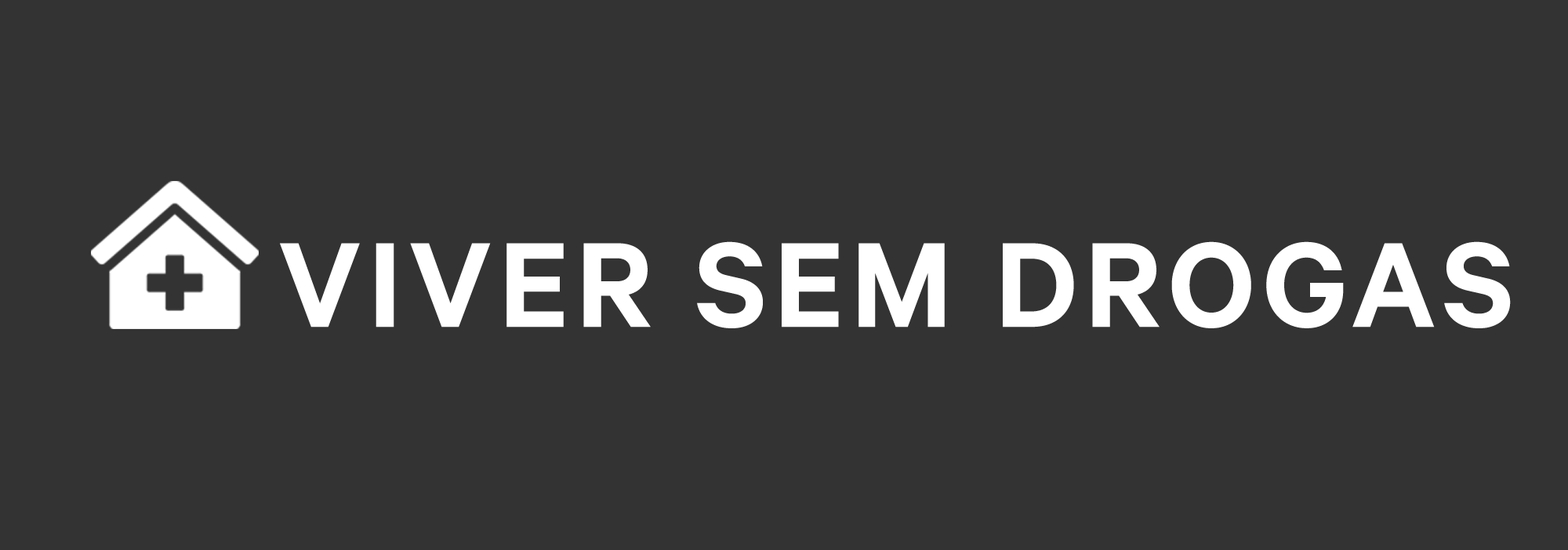
<style>
.page{position:relative;width:1568px;height:550px;background:#333333}
.page>*{position:absolute;margin:0}
.t1{font:136.1px "Calibre-Semibold";letter-spacing:0.05em;color:#ffffff;text-transform:uppercase}
</style>
<div class="page">
<p class="t1" style="left:280px;top:241px;width:1231px;height:87px">Viver Sem Drogas</p>
</div>
